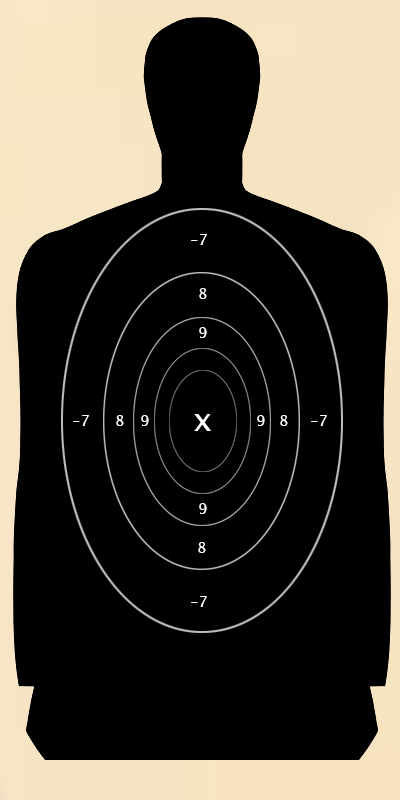
<style>
.page{position:relative;width:400px;height:800px;background:#000000}
.page>*{position:absolute;margin:0}
.t1{font:15px "LucidaConsole";color:#ffffff}
.t2{font:32px "LucidaConsole";color:#ffffff}
</style>
<div class="page">
<p class="t1" style="left:191px;top:234px;width:16px;height:11px">-7</p>
<p class="t1" style="left:199px;top:288px;width:8px;height:11px">8</p>
<p class="t1" style="left:199px;top:327px;width:8px;height:11px">9</p>
<p class="t2" style="left:194px;top:414px;width:17px;height:17px">x</p>
<p class="t1" style="left:73px;top:415px;width:16px;height:11px">-7</p>
<p class="t1" style="left:116px;top:415px;width:8px;height:11px">8</p>
<p class="t1" style="left:141px;top:415px;width:8px;height:11px">9</p>
<p class="t1" style="left:257px;top:415px;width:8px;height:11px">9</p>
<p class="t1" style="left:280px;top:415px;width:8px;height:11px">8</p>
<p class="t1" style="left:311px;top:415px;width:16px;height:11px">-7</p>
<p class="t1" style="left:199px;top:503px;width:8px;height:11px">9</p>
<p class="t1" style="left:198px;top:542px;width:8px;height:11px">8</p>
<p class="t1" style="left:191px;top:596px;width:16px;height:11px">-7</p>
</div>
